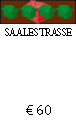
<style>
.page{position:relative;width:76px;height:124px;background:#ffffff}
.page>*{position:absolute;margin:0}
.t1{font:12px "AdobeDevanagari-Regular";color:#000000;scale:0.9 1}
.t2{font:14px "MyriadPro-Regular";color:#000000}
</style>
<div class="page">
<p class="t1" style="left:5px;top:28px;width:67px;height:8px">SAALESTRASSE</p>
<p class="t2" style="left:26px;top:105px;width:25px;height:10px">€ 60</p>
</div>
